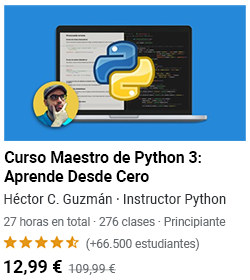
<style>
.page{position:relative;width:250px;height:280px;background:#ffffff}
.page>*{position:absolute;margin:0}
.t1{font:16.2px/19px "Roboto-Bold";color:#000000}
.t2{font:13.8px "Roboto-Regular";color:#303335}
.t3{font:12.1px "Roboto-Regular";color:#6a6f73;scale:0.97 1}
.t4{font:12px "Roboto-Regular";color:#6a6f73}
.t5{font:18.3px "Roboto-Bold";color:#000000;scale:0.97 1}
.t6{font:12.8px "Roboto-Regular";color:#6a6f73}
</style>
<div class="page">
<p class="t1" style="left:4px;top:151px;width:197px;height:34px">Curso Maestro de Python 3: Aprende Desde Cero</p>
<p class="t2" style="left:4px;top:193px;width:222px;height:14px">Héctor C. Guzmán · Instructor Python</p>
<p class="t3" style="left:3px;top:217px;width:223px;height:11px">27 horas en total · 276 clases · Principiante</p>
<p class="t4" style="left:86px;top:238px;width:113px;height:13px">(+66.500 estudiantes)</p>
<p class="t5" style="left:4px;top:260px;width:58px;height:15px">12,99 €</p>
<p class="t6" style="left:68px;top:264px;width:48px;height:11px">109,99 €</p>
</div>
